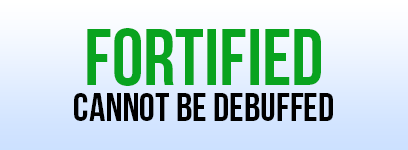
<style>
.page{position:relative;width:408px;height:150px}
.page>*{position:absolute;margin:0}
.t1{font:80px "BebasNeue";color:#09a31f}
.t2{font:40px "BebasNeue";color:#000000}
</style>
<div class="page">
<p class="t1" style="left:87px;top:28px;width:234px;height:58px">fortified</p>
<p class="t2" style="left:74px;top:93px;width:259px;height:28px">cannot be debuffed</p>
</div>
